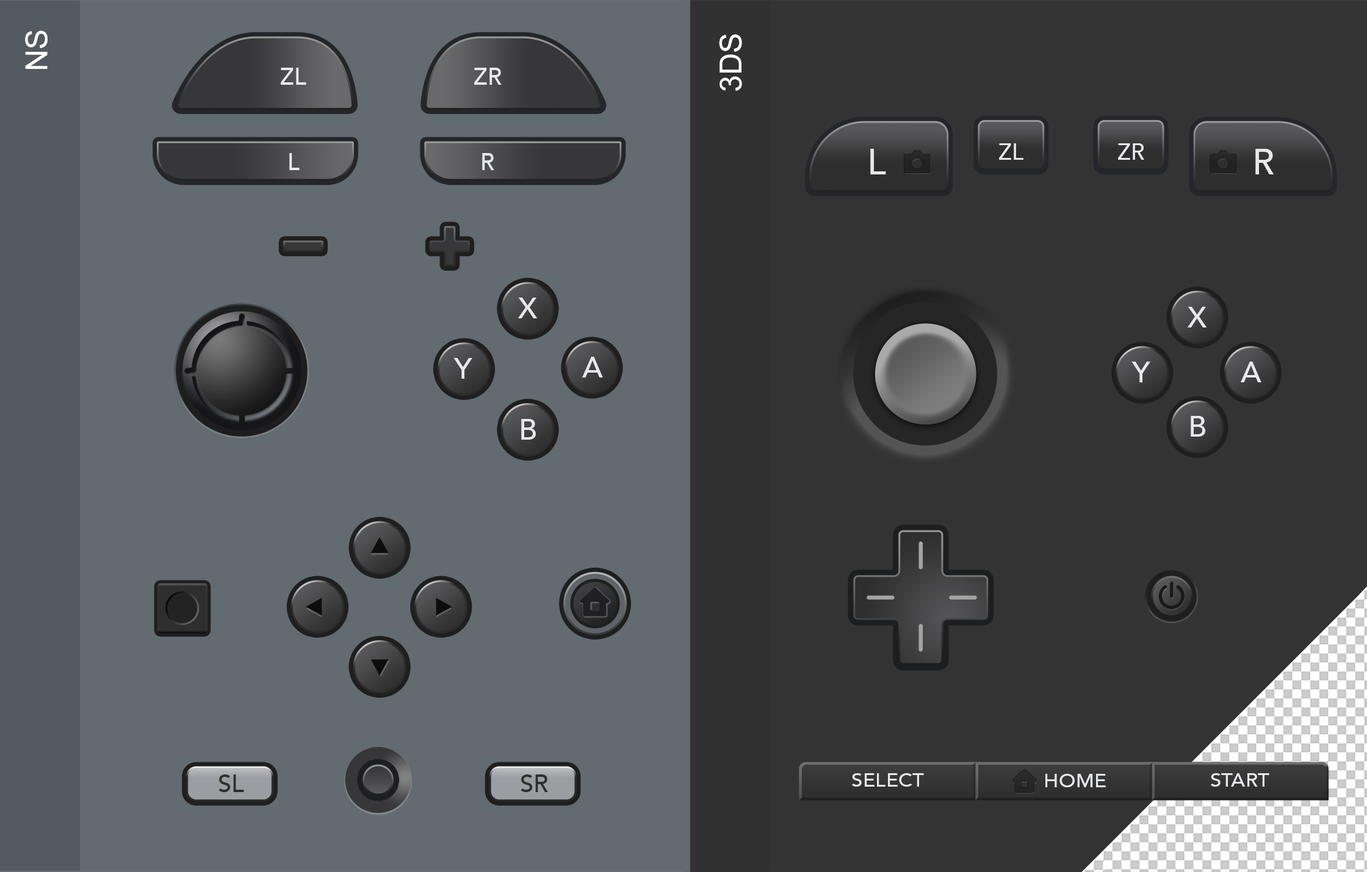
<style>
.page{position:relative;width:1367px;height:872px;background:#626b70}
.page>*{position:absolute;margin:0}
.t1{font:30.5px "ArialMT";color:#ffffff}
.t2{font:23.4px "Avenir-Medium";color:#e7e9eb}
.t3{font:36.2px "Avenir-Medium";color:#e7e9eb}
.t4{font:22.6px "Avenir-Medium";color:#e7e9eb}
.t5{font:29.5px "Avenir-Medium";color:#e7e9eb}
.t6{font:18.4px "Avenir-Medium";color:#e7e9eb;scale:1.11 1}
.t7{font:24.2px "Avenir-Medium";color:#2e2e2f}
</style>
<div class="page">
<p class="t1" style="left:25px;top:31px;width:23px;height:38px;rotate:-90deg">NS</p>
<p class="t1" style="left:719px;top:34px;width:23px;height:57px;rotate:-90deg">3DS</p>
<p class="t2" style="left:281px;top:68px;width:25px;height:17px">ZL</p>
<p class="t2" style="left:474px;top:68px;width:28px;height:17px">ZR</p>
<p class="t3" style="left:870px;top:149px;width:16px;height:25px">L</p>
<p class="t4" style="left:999px;top:143px;width:24px;height:17px">ZL</p>
<p class="t4" style="left:1118px;top:143px;width:26px;height:17px">ZR</p>
<p class="t3" style="left:1255px;top:149px;width:19px;height:25px">R</p>
<p class="t2" style="left:289px;top:153px;width:11px;height:17px">L</p>
<p class="t2" style="left:482px;top:153px;width:12px;height:17px">R</p>
<p class="t5" style="left:517px;top:298px;width:21px;height:20px">X</p>
<p class="t5" style="left:1187px;top:307px;width:20px;height:21px">X</p>
<p class="t5" style="left:453px;top:358px;width:19px;height:21px">Y</p>
<p class="t5" style="left:582px;top:357px;width:21px;height:21px">A</p>
<p class="t5" style="left:1131px;top:362px;width:19px;height:21px">Y</p>
<p class="t5" style="left:1240px;top:362px;width:21px;height:21px">A</p>
<p class="t5" style="left:521px;top:419px;width:15px;height:21px">B</p>
<p class="t5" style="left:1190px;top:416px;width:15px;height:21px">B</p>
<p class="t6" style="left:852px;top:774px;width:72px;height:13px">SELECT</p>
<p class="t6" style="left:1211px;top:774px;width:58px;height:13px">START</p>
<p class="t7" style="left:218px;top:775px;width:26px;height:18px">SL</p>
<p class="t7" style="left:520px;top:775px;width:28px;height:18px">SR</p>
<p class="t6" style="left:1045px;top:774px;width:61px;height:14px">HOME</p>
</div>
